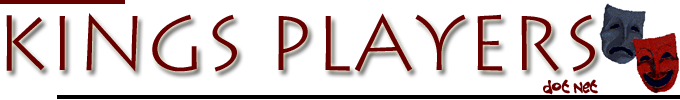
<style>
.page{position:relative;width:680px;height:100px;background:#ffffff}
.page>*{position:absolute;margin:0}
.t1{font:77px "LithographLight";color:#660000}
.t2{font:17px "Croobie";color:#660000}
</style>
<div class="page">
<p class="t1" style="left:6px;top:13px;width:589px;height:59px">Kings Players</p>
<p class="t2" style="left:543px;top:79px;width:55px;height:16px">dot Net</p>
</div>
